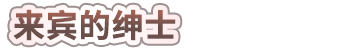
<style>
.page{position:relative;width:360px;height:50px;background:#ffffff}
.page>*{position:absolute;margin:0}
.t1{font:32px "SourceHanSansSC-Bold";color:#73534d;font-weight:bold}
</style>
<div class="page">
<p class="t1" style="left:13px;top:9px;width:163px;height:32px">来宾的绅士</p>
</div>
